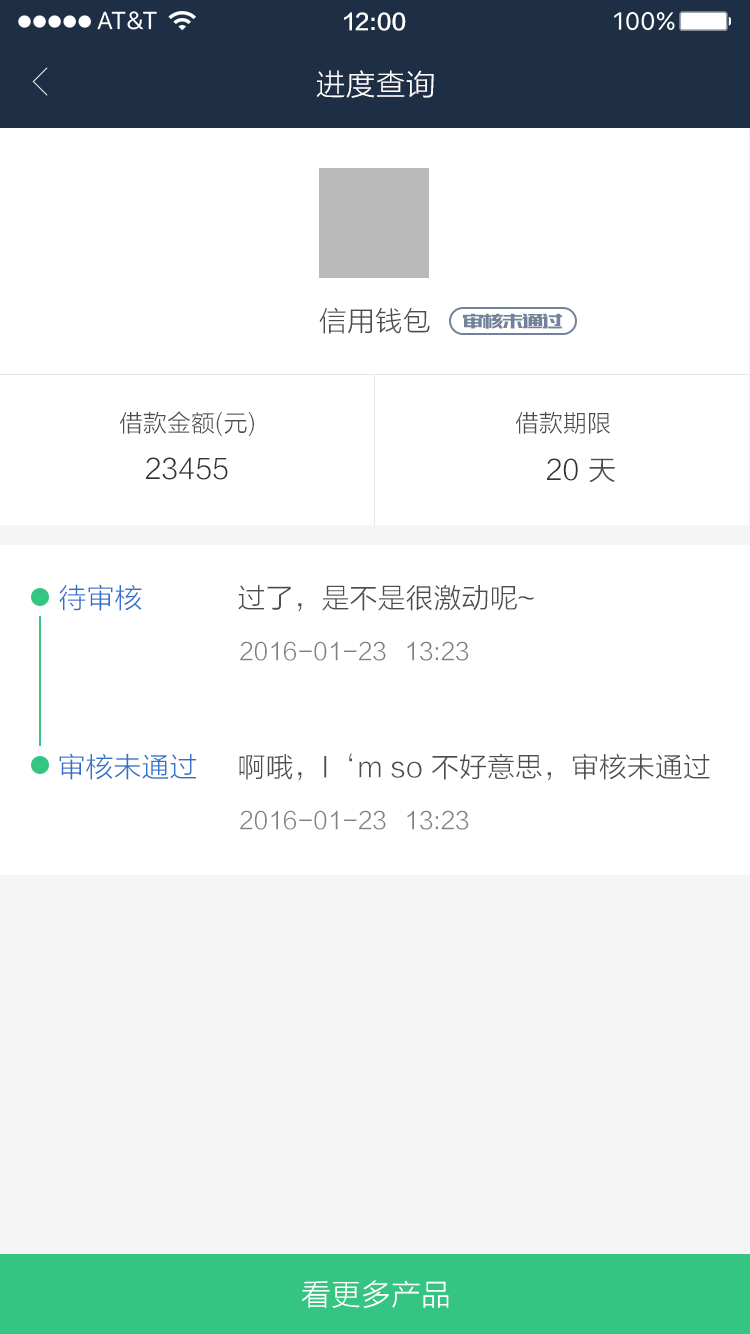
<style>
.page{position:relative;width:750px;height:1334px;background:#ffffff}
.page>*{position:absolute;margin:0}
.t1{font:22px "FZLTZHK--GBK1-0";color:#ffffff}
.t2{font:30px "FZLTXHK";color:#ffffff}
.t3{font:28px "FZLTXHK";color:#4d4d4d}
.t4{font:20px "MFBanHei_Noncommercial-Regular";color:#72829a}
.t5{font:24px "FZLTXHK";color:#4d4d4d}
.t6{font:28px "FZLTXHK";color:#333333}
.t7{font:28px "FZLTXHK";color:#3170cc}
.t8{font:24px "FZLTXHK";color:#808080}
</style>
<div class="page">
<p class="t1" style="left:344px;top:12px;width:62px;height:19px">12:00</p>
<p class="t2" style="left:316px;top:70px;width:118px;height:28px">进度查询</p>
<p class="t3" style="left:319px;top:307px;width:111px;height:27px">信用钱包</p>
<p class="t4" style="left:463px;top:313px;width:100px;height:16px">审核未通过</p>
<p class="t5" style="left:119px;top:411px;width:135px;height:26px">借款金额(元)</p>
<p class="t5" style="left:515px;top:411px;width:95px;height:23px">借款期限</p>
<p class="t6" style="left:146px;top:457px;width:82px;height:23px">23455</p>
<p class="t6" style="left:547px;top:458px;width:31px;height:23px">20</p>
<p class="t3" style="left:589px;top:458px;width:26px;height:25px">天</p>
<p class="t7" style="left:59px;top:584px;width:83px;height:27px">待审核</p>
<p class="t3" style="left:238px;top:584px;width:296px;height:28px">过了，是不是很激动呢~</p>
<p class="t8" style="left:240px;top:641px;width:146px;height:20px">2016-01-23</p>
<p class="t8" style="left:407px;top:641px;width:62px;height:20px">13:23</p>
<p class="t7" style="left:59px;top:753px;width:138px;height:27px">审核未通过</p>
<p class="t3" style="left:239px;top:753px;width:471px;height:28px">啊哦，I‘m so 不好意思，审核未通过</p>
<p class="t8" style="left:240px;top:810px;width:146px;height:20px">2016-01-23</p>
<p class="t8" style="left:407px;top:810px;width:62px;height:20px">13:23</p>
<p class="t2" style="left:302px;top:1280px;width:147px;height:28px">看更多产品</p>
</div>
